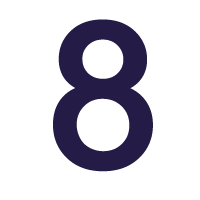
<style>
.page{position:relative;width:200px;height:200px;background:#ffffff}
.page>*{position:absolute;margin:0}
.t1{font:200px "ArialMT";color:#241b47;font-weight:bold}
</style>
<div class="page">
<p class="t1" style="left:53px;top:19px;width:100px;height:153px">8</p>
</div>
